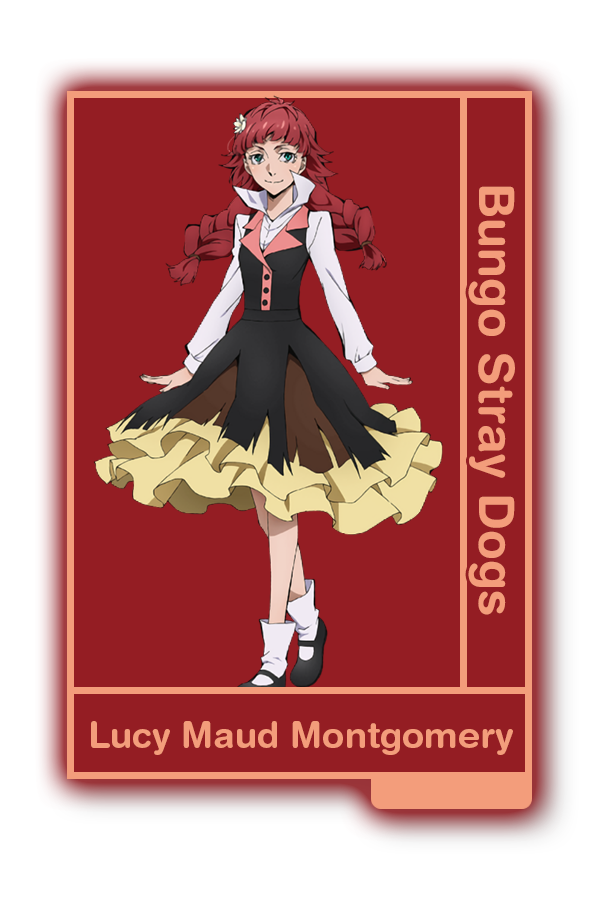
<style>
.page{position:relative;width:600px;height:900px;background:#941d23}
.page>*{position:absolute;margin:0}
.t1{font:48.8px "HelveticaRounded-Bold";color:#f39d7b}
.t2{font:36.2px "HelveticaRounded-Bold";color:#f39d7b}
</style>
<div class="page">
<p class="t1" style="left:468px;top:186px;width:47px;height:429px;rotate:90deg">Bungo Stray Dogs</p>
<p class="t2" style="left:91px;top:721px;width:422px;height:34px">Lucy Maud Montgomery</p>
</div>
